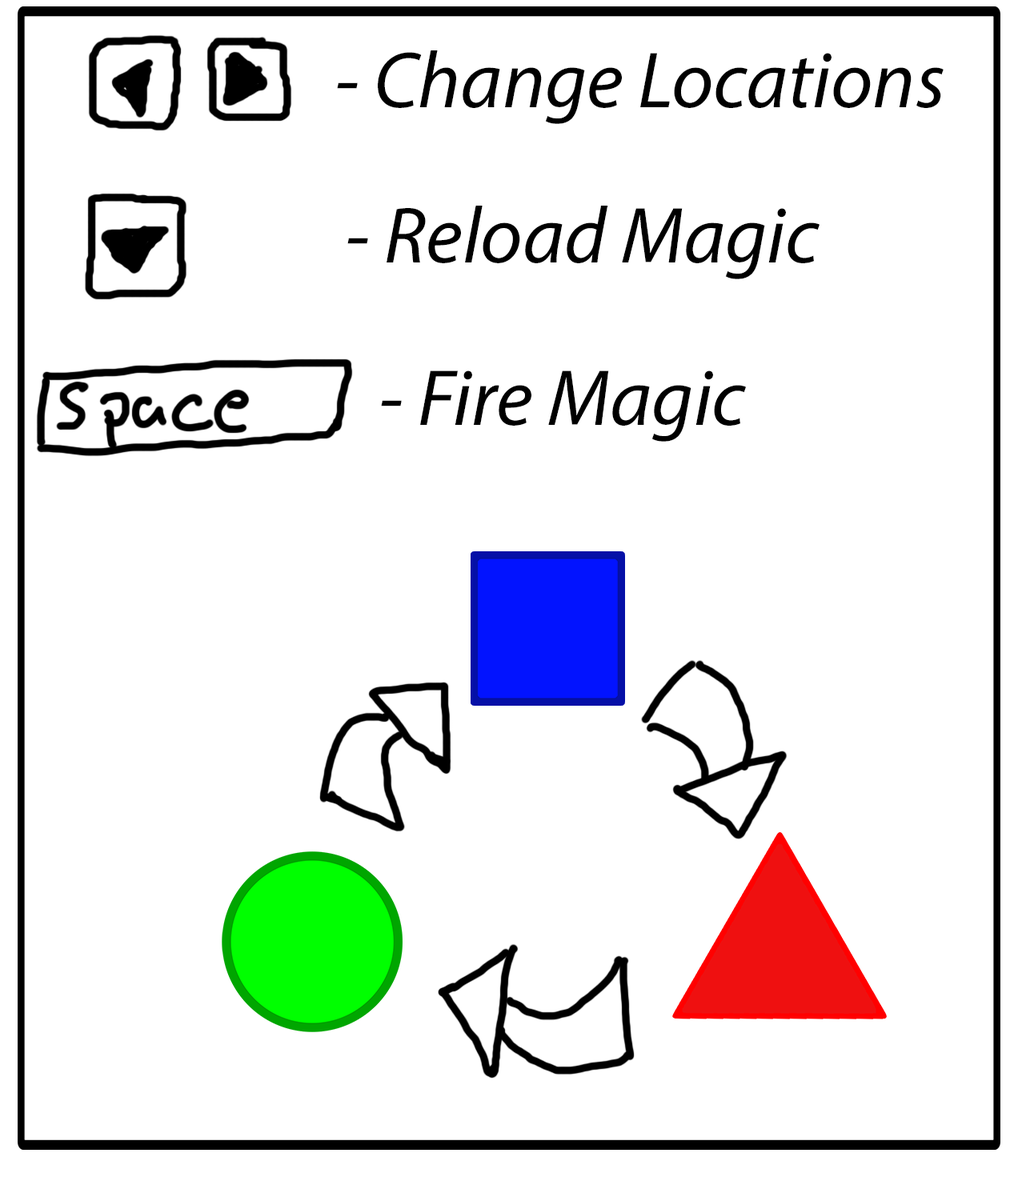
<style>
.page{position:relative;width:1010px;height:1181px;background:#ffffff}
.page>*{position:absolute;margin:0}
.t1{font:80px "MyriadPro-It";color:#000000}
</style>
<div class="page">
<p class="t1" style="left:337px;top:50px;width:606px;height:74px">- Change Locations</p>
<p class="t1" style="left:347px;top:206px;width:472px;height:73px">- Reload Magic</p>
<p class="t1" style="left:381px;top:370px;width:365px;height:72px">- Fire Magic</p>
</div>
